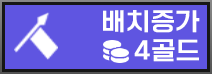
<style>
.page{position:relative;width:212px;height:74px;background:#5f55e1}
.page>*{position:absolute;margin:0}
.t1{font:24.9px "ONEMobileTitleRegular";letter-spacing:0.04em;color:#ffffff}
</style>
<div class="page">
<p class="t1" style="left:103px;top:10px;width:97px;height:23px">배치증가</p>
<p class="t1" style="left:134px;top:39px;width:65px;height:23px">4골드</p>
</div>
